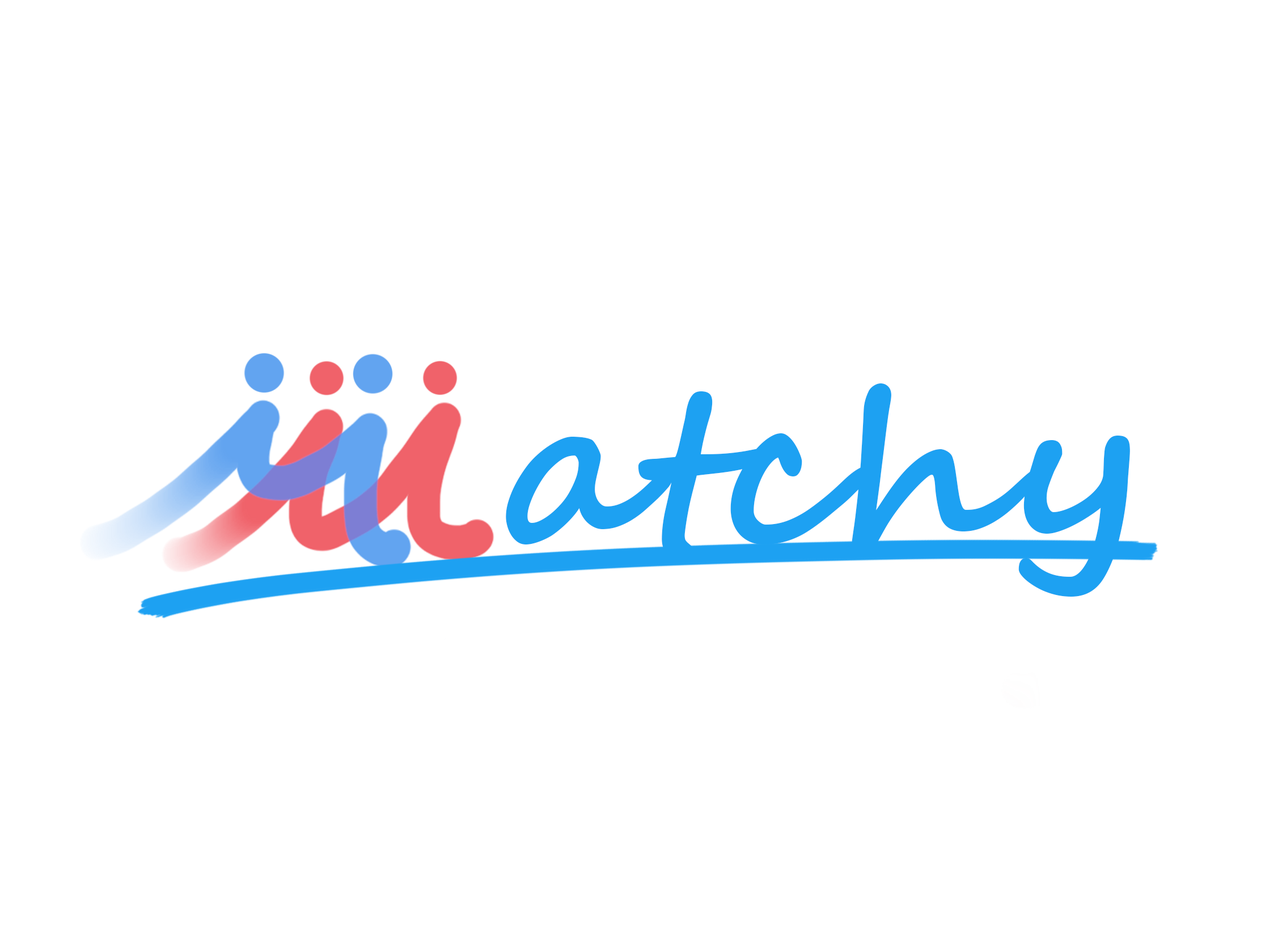
<style>
.page{position:relative;width:1261px;height:946px;background:#ffffff}
.page>*{position:absolute;margin:0}
.t1{font:215.2px "SegoeScript-Bold";color:#1da1f2}
</style>
<div class="page">
<p class="t1" style="left:506px;top:383px;width:624px;height:213px">atchy</p>
</div>
